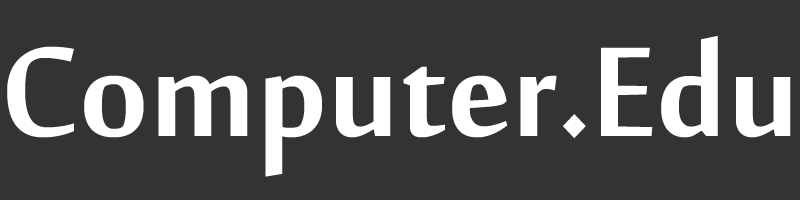
<style>
.page{position:relative;width:800px;height:200px;background:#333333}
.page>*{position:absolute;margin:0}
.t1{font:196px "MoolBoran";color:#ffffff}
</style>
<div class="page">
<p class="t1" style="left:7px;top:36px;width:784px;height:141px">Computer.Edu</p>
</div>
